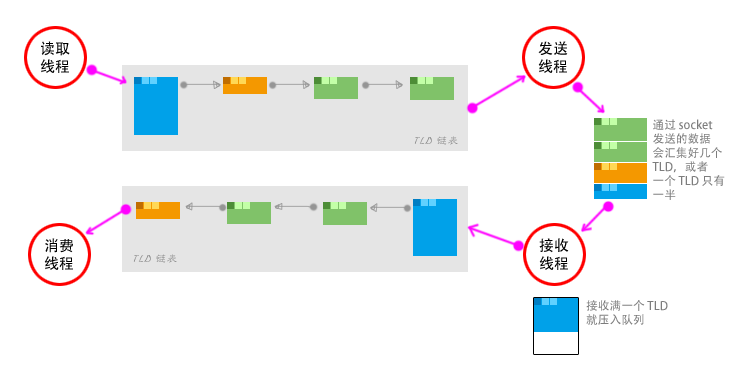
<style>
.page{position:relative;width:745px;height:374px;background:#ffffff}
.page>*{position:absolute;margin:0}
.t1{font:15px "AdobeHeitiStd-Regular";color:#000000}
.t2{font:11.7px "AdobeHeitiStd-Regular";color:#7d7d7d}
.t3{font:11.5px "STLibian-SC-Regular";color:#898989;font-style:italic}
.t4{font:11.8px "AdobeHeitiStd-Regular";color:#7d7d7d}
</style>
<div class="page">
<p class="t1" style="left:40px;top:41px;width:30px;height:32px">读取<br>线程</p>
<p class="t1" style="left:538px;top:41px;width:30px;height:32px">发送<br>线程</p>
<p class="t2" style="left:652px;top:119px;width:73px;height:81px">通过 socket<br>发送的数据<br>会汇集好几个<br>TLD，或者<br>一个 TLD 只有<br>一半</p>
<p class="t3" style="left:414px;top:136px;width:44px;height:9px">TLD 链表</p>
<p class="t1" style="left:44px;top:238px;width:29px;height:32px">消费<br>线程</p>
<p class="t1" style="left:539px;top:238px;width:30px;height:32px">接收<br>线程</p>
<p class="t3" style="left:133px;top:254px;width:44px;height:9px">TLD 链表</p>
<p class="t4" style="left:586px;top:300px;width:82px;height:25px">接收满一个 TLD<br>就压入队列</p>
</div>
